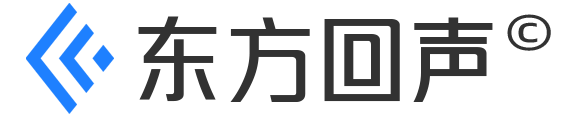
<style>
.page{position:relative;width:571px;height:117px;background:#ffffff}
.page>*{position:absolute;margin:0}
.t1{font:100px "CJGaoDeGuo-MH";letter-spacing:0.06em;color:#323232;scale:1.2 1}
.t2{font:50px "AlibabaPuHuiTi-Regular";letter-spacing:0.06em;color:#323232;scale:1.2 1}
</style>
<div class="page">
<p class="t1" style="left:138px;top:16px;width:355px;height:86px">东方回声</p>
<p class="t2" style="left:507px;top:14px;width:44px;height:37px">©</p>
</div>
